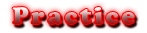
<style>
.page{position:relative;width:147px;height:33px;background:#ffffff}
.page>*{position:absolute;margin:0}
.t1{font:24px "CooperBlackStd";letter-spacing:0.125em;scale:0.97 1}
</style>
<div class="page">
<p class="t1" style="left:12px;top:7px;width:123px;height:17px">Practice</p>
</div>
